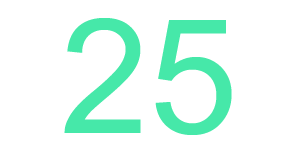
<style>
.page{position:relative;width:300px;height:150px;background:#ffffff}
.page>*{position:absolute;margin:0}
.t1{font:160px "ArialMT";color:#46e8a9}
</style>
<div class="page">
<p class="t1" style="left:64px;top:18px;width:168px;height:117px">25</p>
</div>
